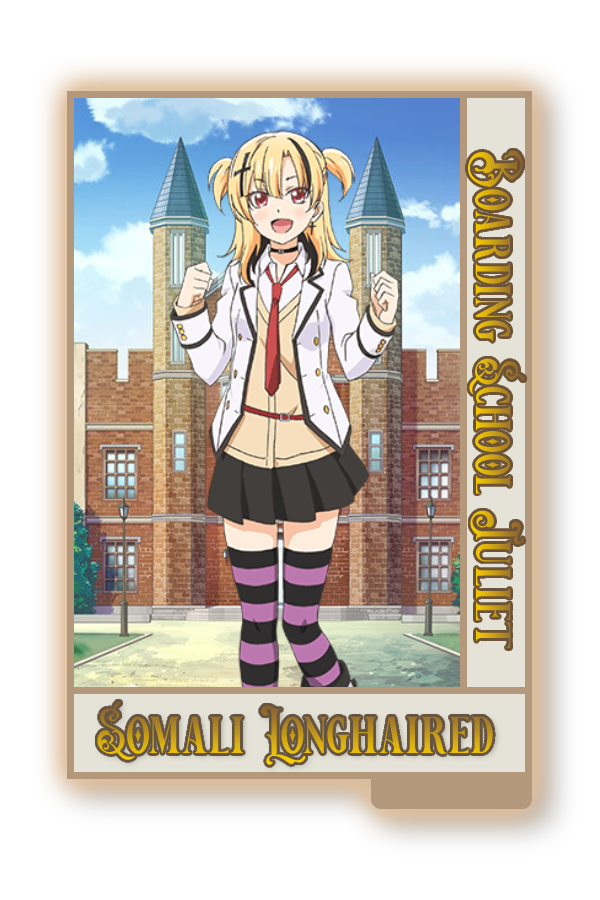
<style>
.page{position:relative;width:600px;height:900px;background:#ffffff}
.page>*{position:absolute;margin:0}
.t1{font:58.9px "VictorianDecadeDemoVersion"}
.t2{font:62.3px "VictorianDecadeDemoVersion"}
</style>
<div class="page">
<p class="t1" style="left:468px;top:150px;width:57px;height:498px;rotate:90deg">Boarding School Juliet</p>
<p class="t2" style="left:96px;top:701px;width:397px;height:64px">Somali Longhaired</p>
</div>
